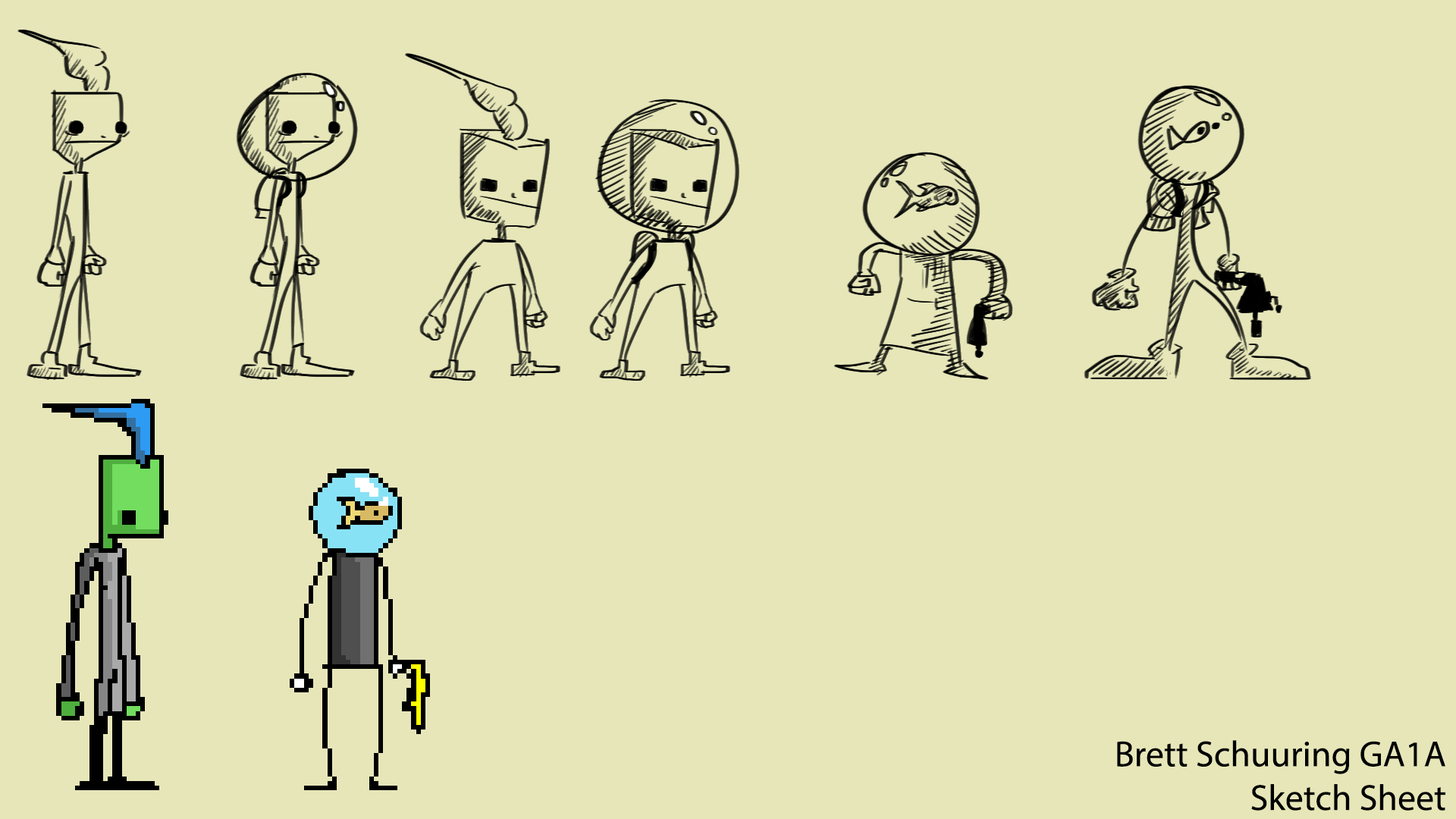
<style>
.page{position:relative;width:1456px;height:819px;background:#e6e6b9}
.page>*{position:absolute;margin:0}
.t1{font:36.4px "MyriadPro-Regular";color:#000000}
</style>
<div class="page">
<p class="t1" style="left:1117px;top:740px;width:328px;height:71px;text-align:right">Brett Schuuring GA1A<br>Sketch Sheet</p>
</div>
